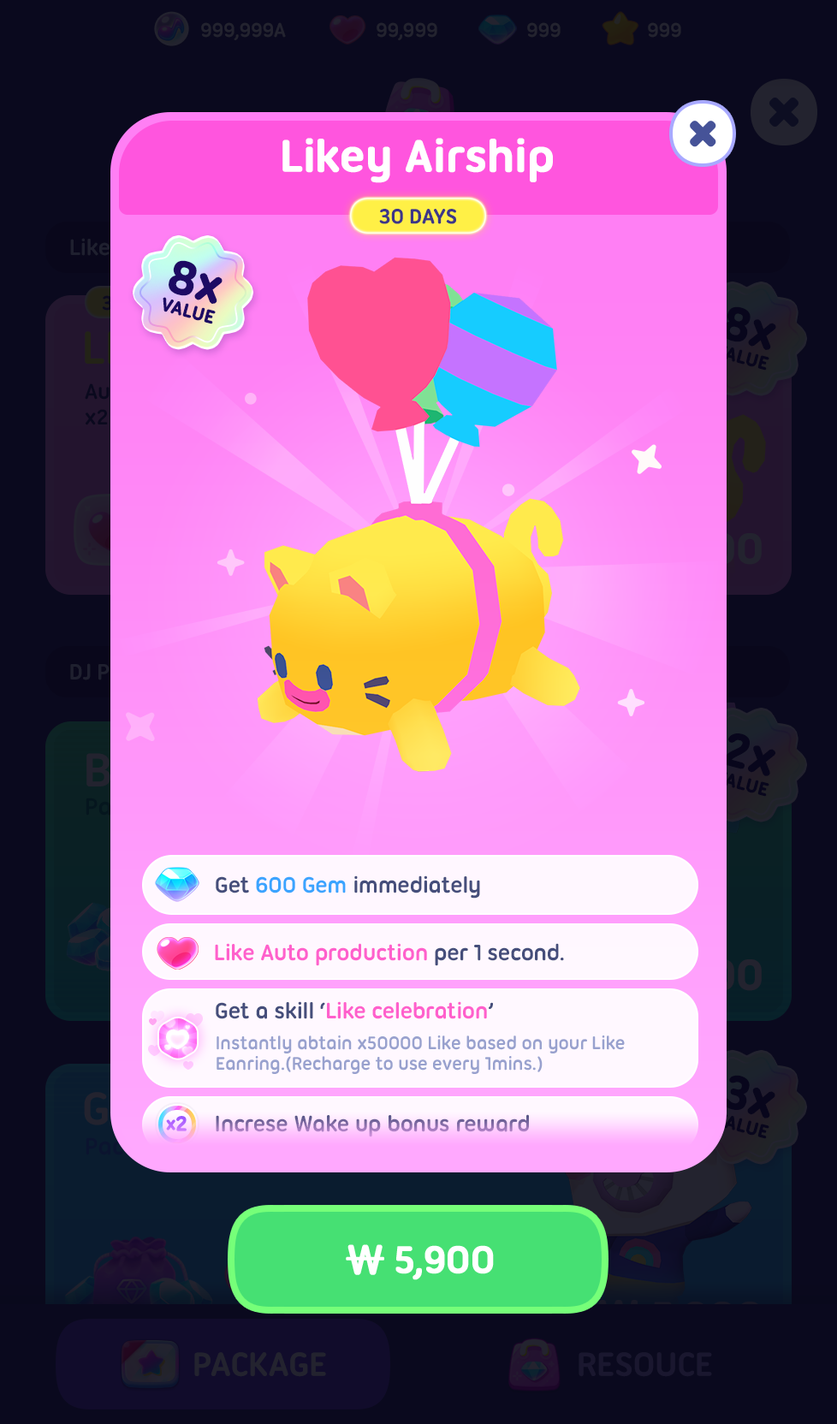
<style>
.page{position:relative;width:837px;height:1424px;background:#0a091e}
.page>*{position:absolute;margin:0}
.t1{font:47.9px "UbuntuTitling-Bold";letter-spacing:-0.025em;color:#ffffff;font-weight:bold}
.t2{font:22.5px "UbuntuTitling-Bold";letter-spacing:-0.025em;color:#3d3787;text-transform:uppercase}
.t3{font:49.9px "UbuntuTitling-Bold";letter-spacing:-0.025em;color:#1d0a64;font-weight:bold}
.t4{font:19.6px "UbuntuTitling-Bold";letter-spacing:-0.025em;color:#1d0a64;text-transform:uppercase;font-weight:bold}
.t5{font:24px "UbuntuTitling-Bold";letter-spacing:-0.025em;color:#454e7b}
.t6{font:24px "UbuntuTitling-Bold";letter-spacing:-0.025em;color:#3ba4ff}
.t7{font:24px "UbuntuTitling-Bold";letter-spacing:-0.025em;color:#ff60cc}
.t8{font:19.7px/20.5px "UbuntuTitling-Bold";letter-spacing:-0.025em;color:#98a1ce}
.t9{font:18.9px "UbuntuTitling-Bold";letter-spacing:-0.05em;color:#b568ff;font-weight:bold}
.t10{font:22.2px "UbuntuTitling-Bold";letter-spacing:-0.05em;color:#b568ff;font-weight:bold}
.t11{font:24px "UbuntuTitling-Bold";letter-spacing:-0.025em}
.t12{font:41.1px "UbuntuTitling-Bold";letter-spacing:-0.04em;color:#ffffff;text-transform:uppercase;font-weight:bold}
.t13{font:41.1px "NanumSquareRoundOTFEB";letter-spacing:-0.04em;color:#ffffff;text-transform:uppercase;font-weight:bold}
</style>
<div class="page">
<p class="t1" style="left:282px;top:138px;width:271px;height:45px">Likey Airship</p>
<p class="t2" style="left:379px;top:209px;width:77px;height:15px">30 days</p>
<p class="t3" style="left:169px;top:260px;width:54px;height:44px;rotate:15deg">8x</p>
<p class="t4" style="left:163px;top:297px;width:53px;height:27px;rotate:15deg">Value</p>
<p class="t5" style="left:216px;top:876px;width:264px;height:23px">Get <span class="t6">600 Gem </span>immediately</p>
<p class="t7" style="left:215px;top:943px;width:349px;height:23px">Like Auto production <span class="t5">per 1 second.</span></p>
<p class="t7" style="left:216px;top:1002px;width:277px;height:17px"><span class="t5">Get a skill ‘</span>Like celebration<span class="t5">’</span></p>
<p class="t8" style="left:217px;top:1036px;width:408px;height:38px">Instantly abtain x50000 Like based on your Like <br>Eanring.(Recharge to use every 1mins.)</p>
<p class="t9" style="left:166px;top:1116px;width:21px;height:16px">x<span class="t10">2</span></p>
<p class="t11" style="left:216px;top:1115px;width:313px;height:23px">Increse Wake up bonus reward</p>
<p class="t12" style="left:346px;top:1245px;width:148px;height:36px"><span class="t13">₩ </span>5,900</p>
</div>
